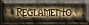
<style>
.page{position:relative;width:89px;height:25px}
.page>*{position:absolute;margin:0}
.t1{font:11px "Morpheus";color:#351f02}
</style>
<div class="page">
<p class="t1" style="left:16px;top:7px;width:56px;height:11px">Reglamento</p>
</div>
